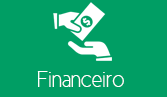
<style>
.page{position:relative;width:167px;height:97px;background:#009e64}
.page>*{position:absolute;margin:0}
.t1{font:22.7px "CicleFina";color:#ffffff}
</style>
<div class="page">
<p class="t1" style="left:37px;top:71px;width:87px;height:16px">Financeiro</p>
</div>
